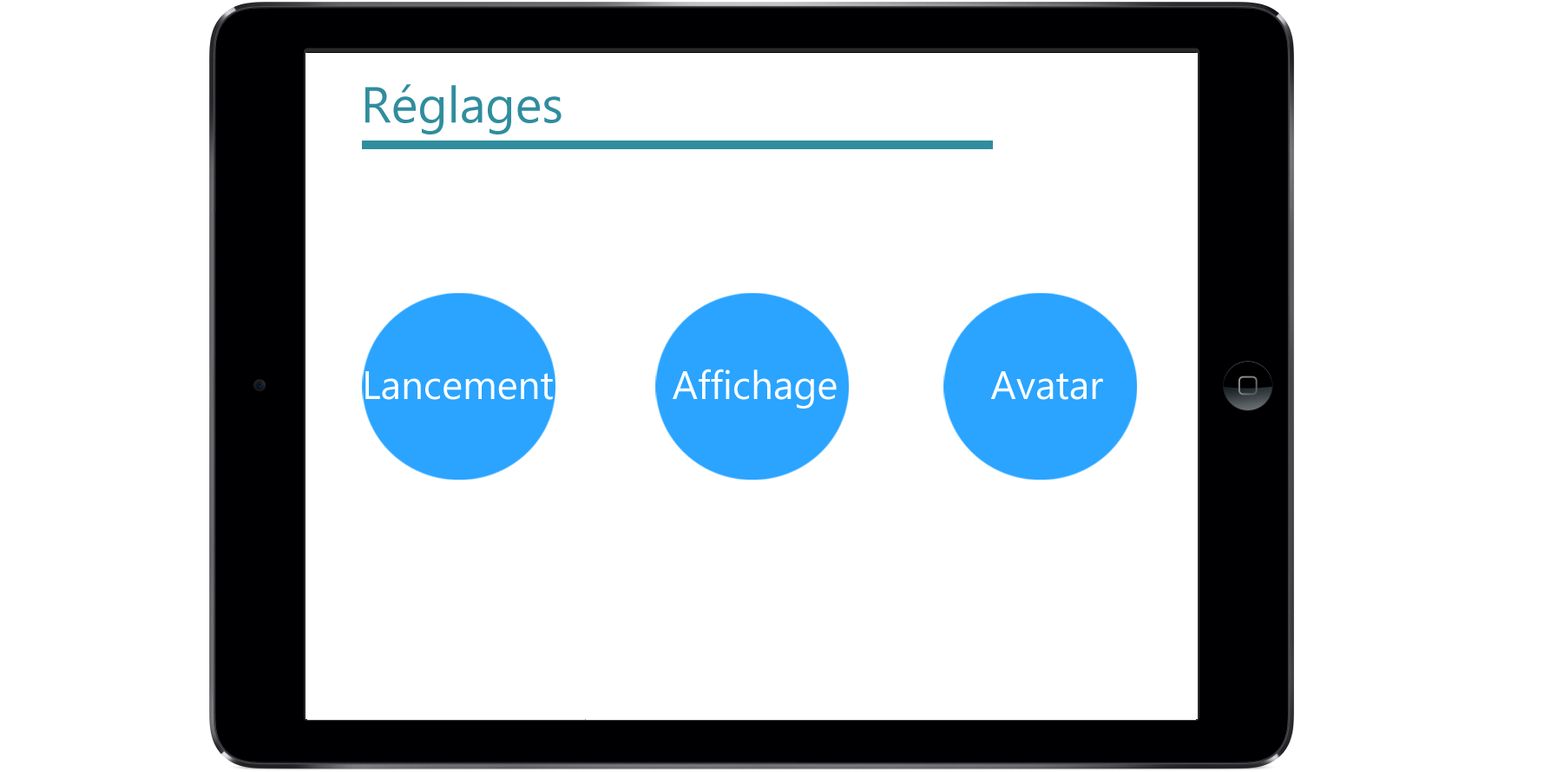
<style>
.page{position:relative;width:1544px;height:772px;background:#ffffff}
.page>*{position:absolute;margin:0}
.t1{font:39.8px "NirmalaUI";color:#fdffff}
</style>
<div class="page">
<p class="t1" style="left:365px;top:371px;width:188px;height:29px">Lancement</p>
<p class="t1" style="left:673px;top:369px;width:164px;height:40px">Affichage</p>
<p class="t1" style="left:990px;top:371px;width:113px;height:29px">Avatar</p>
</div>
